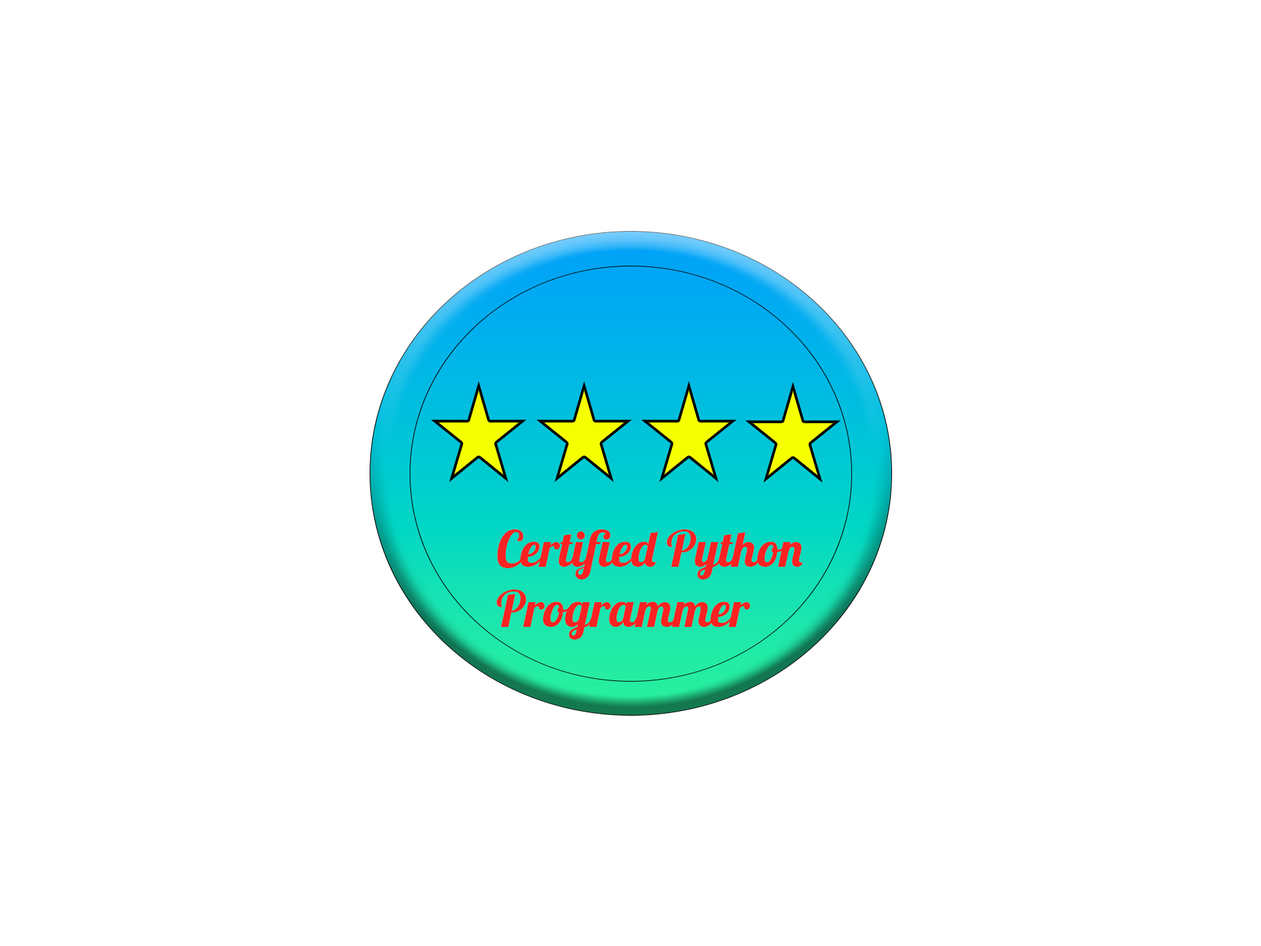
<style>
.page{position:relative;width:1261px;height:946px;background:#ffffff}
.page>*{position:absolute;margin:0}
.t1{font:50px "Lobster-Regular";color:#ff2121}
</style>
<div class="page">
<p class="t1" style="left:496px;top:529px;width:307px;height:110px">Certified Python <br>Programmer</p>
</div>
